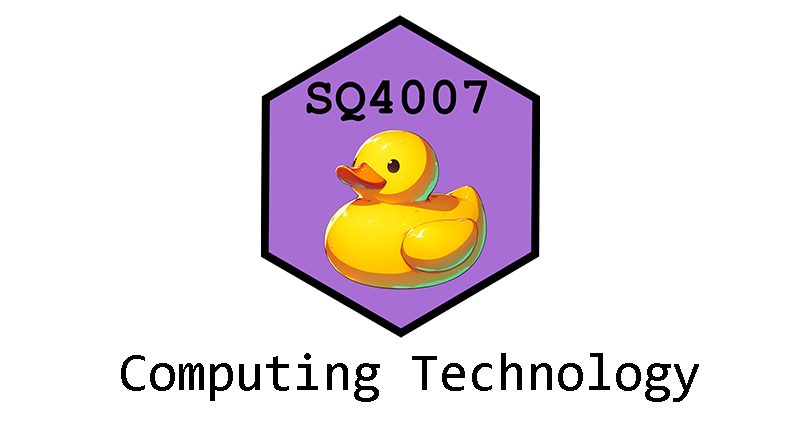
<style>
.page{position:relative;width:800px;height:425px;background:#ffffff}
.page>*{position:absolute;margin:0}
.t1{font:53px "Consolas";color:#000000}
</style>
<div class="page">
<p class="t1" style="left:121px;top:353px;width:578px;height:49px">Computing Technology</p>
</div>
